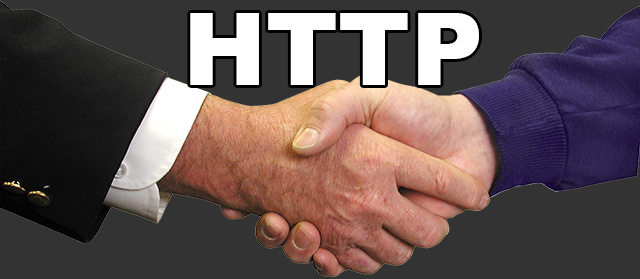
<style>
.page{position:relative;width:640px;height:279px;background:#333333}
.page>*{position:absolute;margin:0}
.t1{font:100px "ArialMTBlack";color:#ffffff}
</style>
<div class="page">
<p class="t1" style="left:190px;top:13px;width:289px;height:72px">HTTP</p>
</div>
